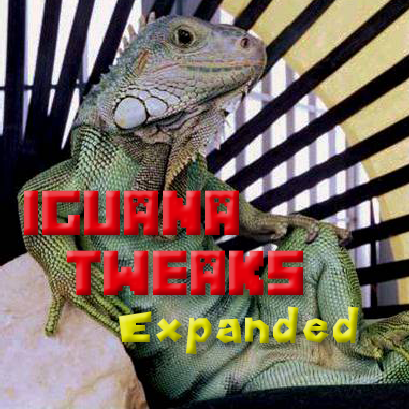
<style>
.page{position:relative;width:409px;height:409px}
.page>*{position:absolute;margin:0}
.t1{font:56.5px "Minecrafter"}
.t2{font:56.5px "MarioKartWiiPlacementRegular"}
</style>
<div class="page">
<p class="t1" style="left:24px;top:190px;width:215px;height:45px">Iguana</p>
<p class="t1" style="left:66px;top:250px;width:237px;height:45px">Tweaks</p>
<p class="t2" style="left:119px;top:306px;width:240px;height:49px">Expanded</p>
</div>
